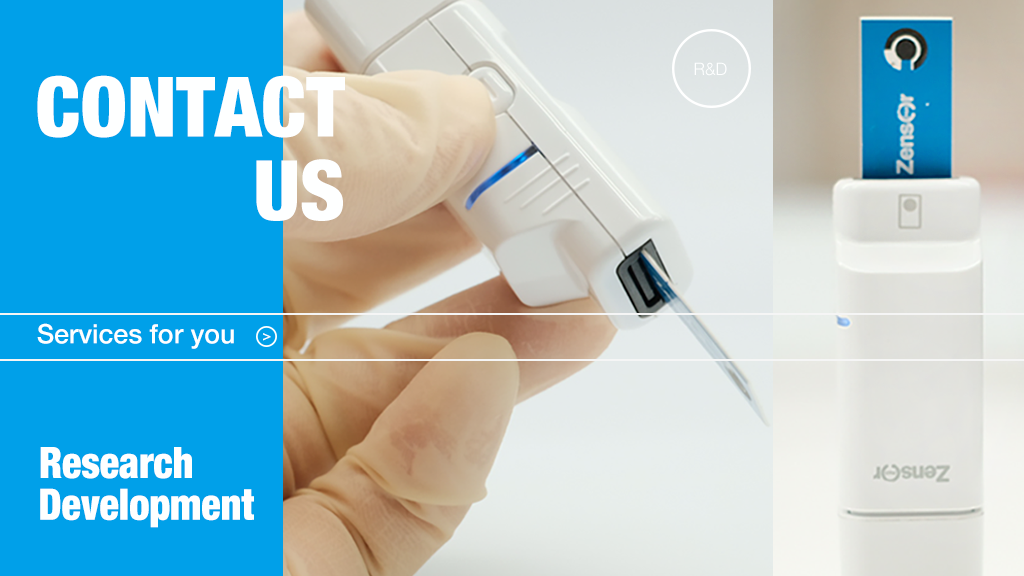
<style>
.page{position:relative;width:1024px;height:576px;background:#00a0e9}
.page>*{position:absolute;margin:0}
.t1{font:17.3px "HelveticaNeue-Light";color:#feffff}
.t2{font:83.5px "HelveticaNeue-CondensedBlack";color:#feffff}
.t3{font:26.7px "HelveticaNeue-Medium";color:#feffff}
.t4{font:14.7px "HelveticaNeue-Medium";color:#feffff}
.t5{font:43.4px "HelveticaNeue-CondensedBlack";color:#feffff;scale:0.92 1}
</style>
<div class="page">
<p class="t1" style="left:694px;top:62px;width:33px;height:14px">R&amp;D</p>
<p class="t2" style="left:37px;top:75px;width:308px;height:63px">CONTACT</p>
<p class="t2" style="left:256px;top:159px;width:87px;height:62px">US</p>
<p class="t3" style="left:37px;top:323px;width:197px;height:26px">Services for you</p>
<p class="t4" style="left:263px;top:333px;width:8px;height:8px">&gt;</p>
<p class="t5" style="left:40px;top:447px;width:152px;height:32px">Research</p>
<p class="t5" style="left:40px;top:488px;width:214px;height:40px">Development</p>
</div>
